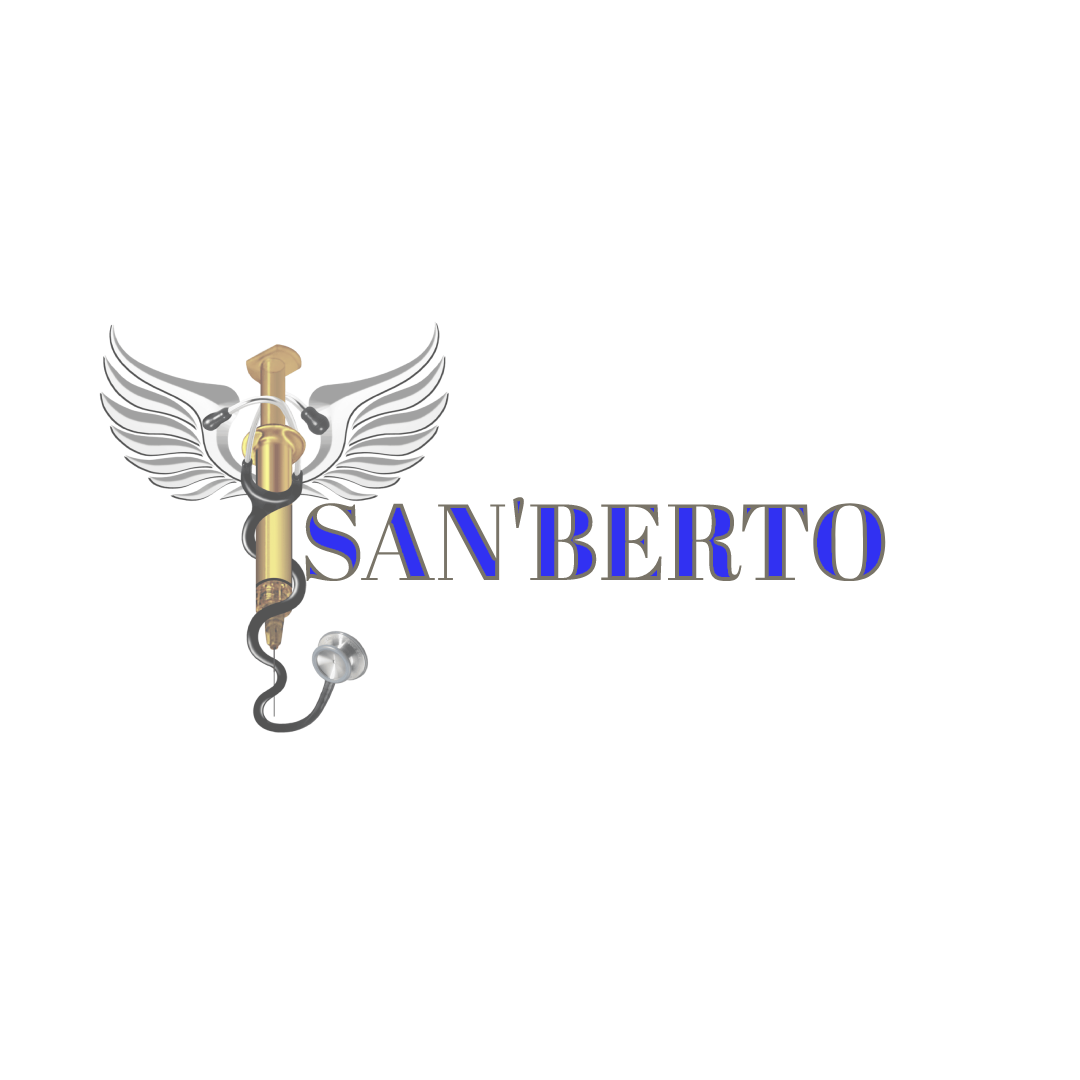
<style>
.page{position:relative;width:1080px;height:1080px;background:#ffffff}
.page>*{position:absolute;margin:0}
.t1{font:108px "AbrilFatface-Regular";text-transform:uppercase}
</style>
<div class="page">
<p class="t1" style="left:305px;top:497px;width:581px;height:85px">San'Berto</p>
</div>
